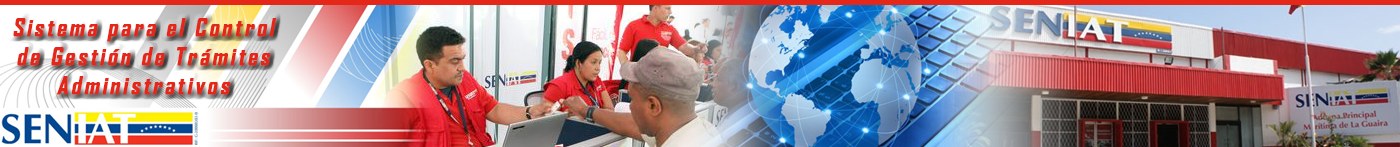
<style>
.page{position:relative;width:1400px;height:147px}
.page>*{position:absolute;margin:0}
.t1{font:24px "AgencyFB-Bold";letter-spacing:0.1em;color:#e42718;font-weight:bold;font-style:italic}
</style>
<div class="page">
<p class="t1" style="left:13px;top:18px;width:263px;height:77px;text-align:center">Sistema para el Control<br>de Gestión de Trámites<br>Administrativos</p>
</div>
